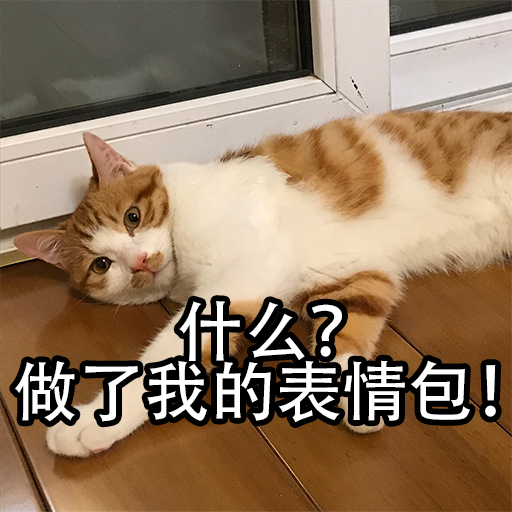
<style>
.page{position:relative;width:512px;height:512px}
.page>*{position:absolute;margin:0}
.t1{font:66px/60px "AdobeHeitiStd-Regular";color:#ffffff}
</style>
<div class="page">
<p class="t1" style="left:15px;top:301px;width:481px;height:122px;text-align:center">什么？<br>做了我的表情包！</p>
</div>
